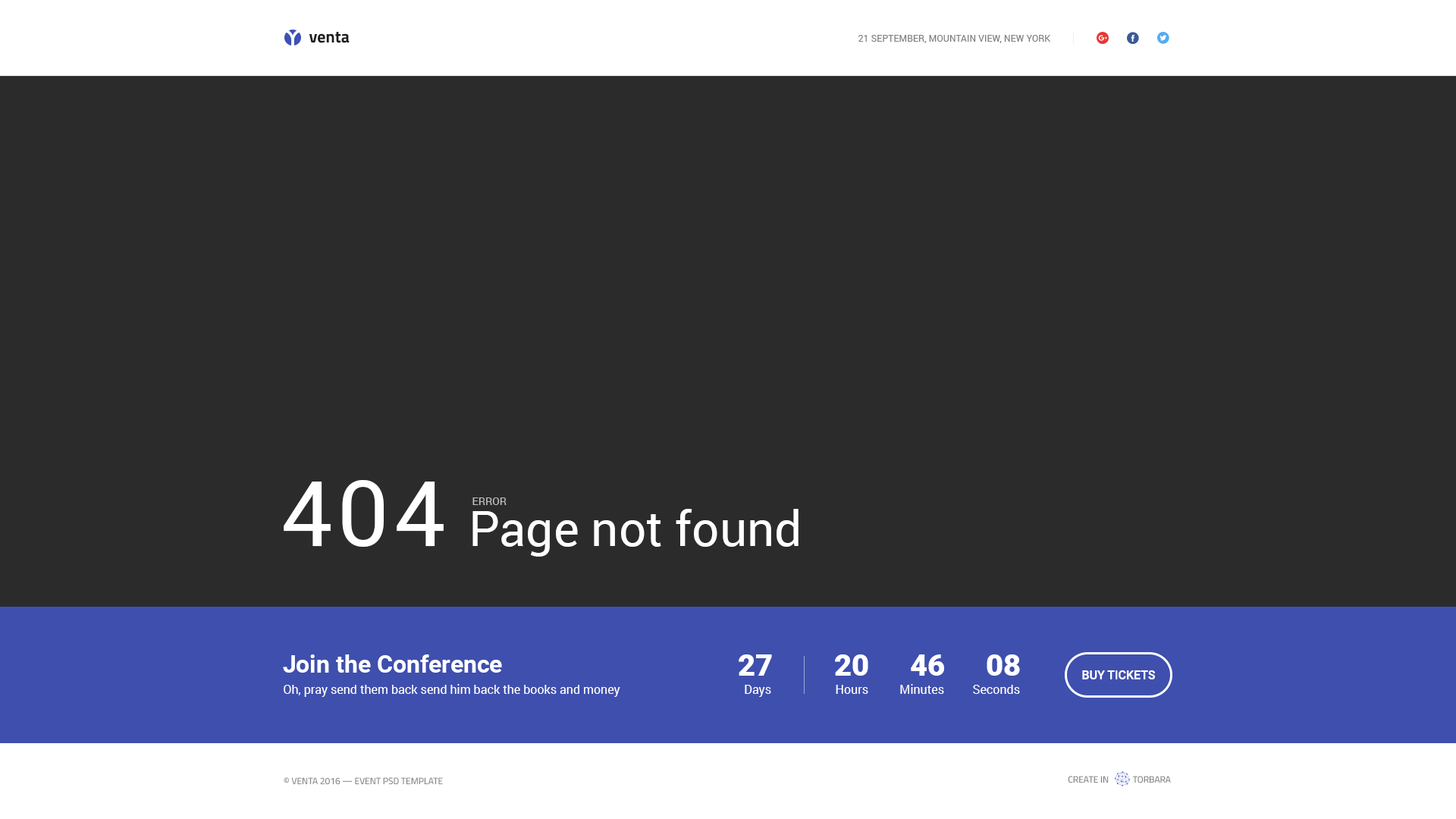
<style>
.page{position:relative;width:1456px;height:819px;background:#2b2b2b}
.page>*{position:absolute;margin:0}
.t1{font:16.7px "TitilliumWeb-Bold";color:#1c1c1c}
.t2{font:9.1px "Roboto-Regular";letter-spacing:0.01em;color:#808080;text-transform:uppercase}
.t3{font:91px "Roboto-Regular";letter-spacing:0.06em;color:#ffffff;text-transform:uppercase}
.t4{font:10.6px "Roboto-Regular";color:#bfbfbf;text-transform:uppercase}
.t5{font:48.5px "Roboto-Regular";color:#ffffff}
.t6{font:24.3px "Roboto-Bold";color:#ffffff}
.t7{font:30.3px "Roboto-Black";color:#ffffff}
.t8{font:12.1px "Roboto-Medium";color:#ffffff;text-transform:uppercase}
.t9{font:12.1px "Roboto-Regular";color:#ffffff}
.t10{font:9.1px "TitilliumWeb-Regular";color:#828488;text-transform:uppercase}
.t11{font:9.1px "TitilliumWeb-Regular";color:#808080;text-transform:uppercase}
</style>
<div class="page">
<p class="t1" style="left:309px;top:32px;width:41px;height:11px">venta</p>
<p class="t2" style="left:858px;top:35px;width:193px;height:8px">21 september, Mountain view, New York</p>
<p class="t3" style="left:284px;top:480px;width:160px;height:67px">404</p>
<p class="t4" style="left:472px;top:497px;width:35px;height:8px">error</p>
<p class="t5" style="left:472px;top:509px;width:327px;height:48px">Page not found</p>
<p class="t6" style="left:283px;top:654px;width:219px;height:19px">Join the Conference</p>
<p class="t7" style="left:739px;top:654px;width:33px;height:22px">27</p>
<p class="t7" style="left:835px;top:654px;width:33px;height:22px">20</p>
<p class="t7" style="left:911px;top:654px;width:33px;height:22px">46</p>
<p class="t7" style="left:987px;top:654px;width:33px;height:22px">08</p>
<p class="t8" style="left:1082px;top:670px;width:73px;height:9px">Buy tickets</p>
<p class="t9" style="left:284px;top:684px;width:336px;height:13px">Oh, pray send them back send him back the books and money</p>
<p class="t9" style="left:745px;top:685px;width:26px;height:12px">Days</p>
<p class="t9" style="left:836px;top:685px;width:32px;height:9px">Hours</p>
<p class="t9" style="left:900px;top:684px;width:44px;height:10px">Minutes</p>
<p class="t9" style="left:973px;top:685px;width:47px;height:9px">Seconds</p>
<p class="t10" style="left:284px;top:777px;width:159px;height:8px">© venta 2016 — Event psd template</p>
<p class="t11" style="left:1068px;top:776px;width:103px;height:7px">Create in            Torbara</p>
</div>
